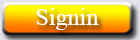
<style>
.page{position:relative;width:140px;height:40px}
.page>*{position:absolute;margin:0}
.t1{font:24px "TimesNewRomanPSMT";color:#ffffff}
</style>
<div class="page">
<p class="t1" style="left:36px;top:8px;width:63px;height:22px">Signin</p>
</div>
